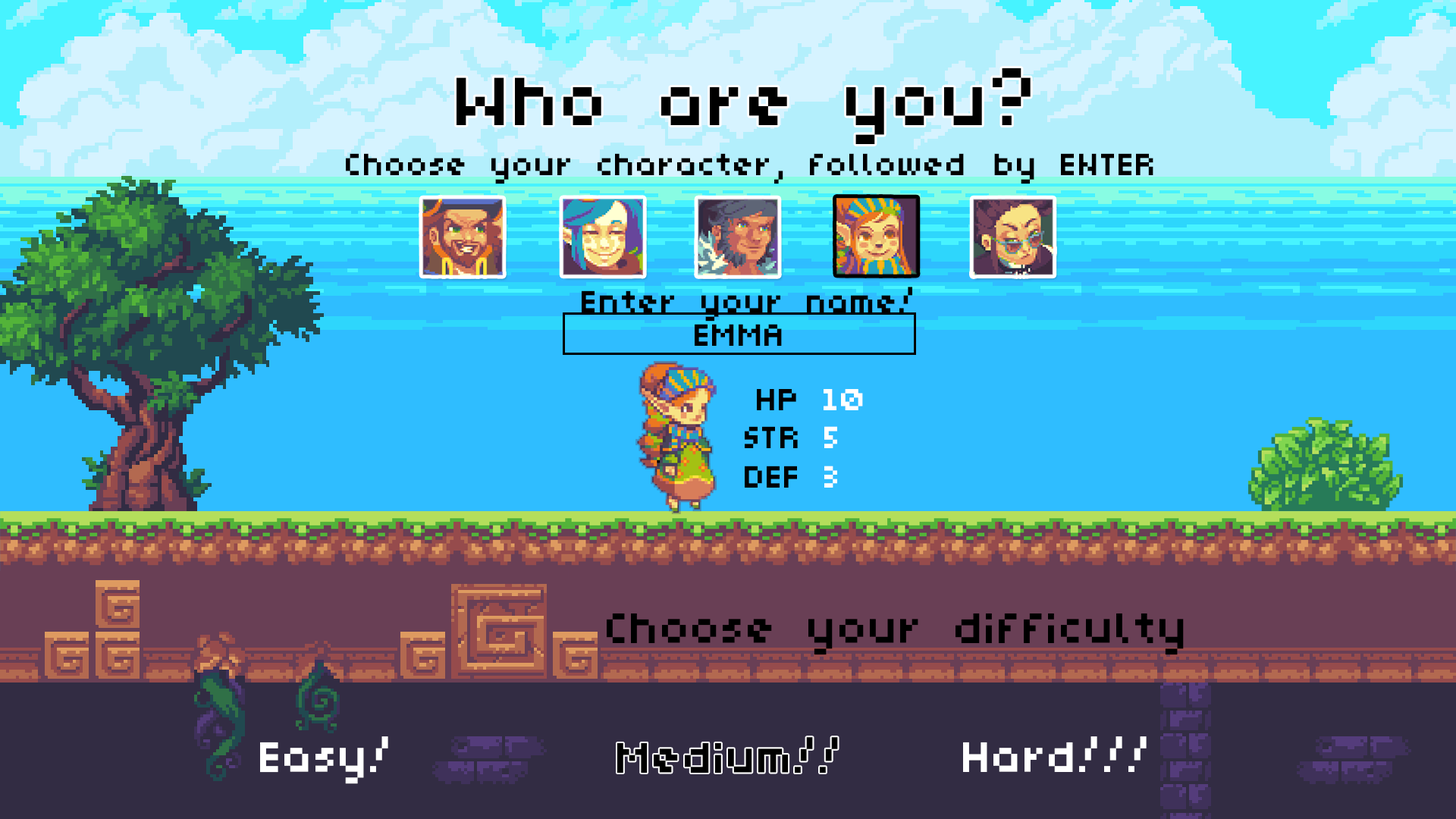
<style>
.page{position:relative;width:1456px;height:819px}
.page>*{position:absolute;margin:0}
.t1{font:151.7px "Bitty";letter-spacing:0.01em;color:#000000}
.t2{font:68.3px "Bitty";letter-spacing:0.01em;color:#000000}
.t3{font:67.9px "Bitty";letter-spacing:0.01em;color:#000000}
.t4{font:67.9px "Bitty";letter-spacing:0.01em;color:#ffffff}
.t5{font:68.4px "Bitty";letter-spacing:0.01em;color:#000000}
.t6{font:68.4px "Bitty";letter-spacing:0.01em;color:#ffffff}
.t7{font:94.8px "Bitty";letter-spacing:0.01em;color:#000000}
.t8{font:94.8px "Bitty";letter-spacing:0.01em;color:#ffffff}
</style>
<div class="page">
<p class="t1" style="left:457px;top:68px;width:574px;height:76px">Who are you?</p>
<p class="t2" style="left:346px;top:153px;width:807px;height:31px">Choose your character, followed by ENTER</p>
<p class="t2" style="left:582px;top:287px;width:330px;height:35px">Enter your name!</p>
<p class="t2" style="left:695px;top:324px;width:87px;height:22px;text-align:center">EMMA<br>E</p>
<p class="t3" style="left:757px;top:389px;width:106px;height:21px">HP <span class="t4">10</span></p>
<p class="t5" style="left:745px;top:426px;width:92px;height:22px">STR <span class="t6">5</span></p>
<p class="t5" style="left:745px;top:466px;width:92px;height:22px">DEF <span class="t6">3</span></p>
<p class="t7" style="left:607px;top:613px;width:577px;height:42px">Choose your difficulty</p>
<p class="t8" style="left:260px;top:736px;width:128px;height:48px">Easy!</p>
<p class="t7" style="left:617px;top:737px;width:221px;height:36px">Medium!!</p>
<p class="t8" style="left:963px;top:736px;width:184px;height:36px">Hard!!!</p>
</div>
